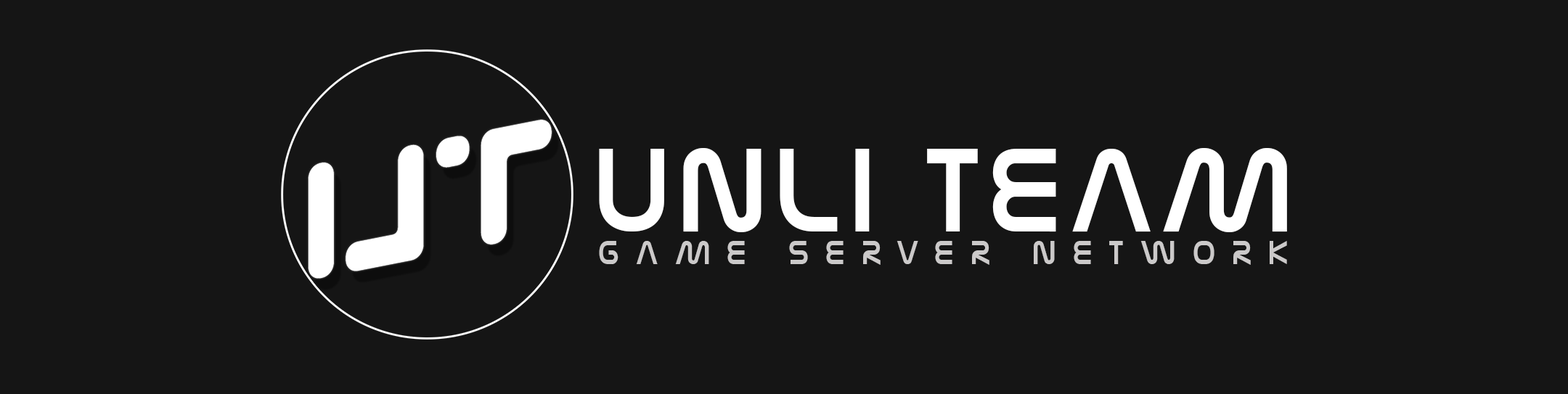
<style>
.page{position:relative;width:1568px;height:394px;background:#151515}
.page>*{position:absolute;margin:0}
.t1{font:131.8px "NasalizationFree";letter-spacing:0.066em;color:#ffffff;scale:0.93 1}
.t2{font:36.9px "NasalizationFree";letter-spacing:0.5em;color:#cbc9c9;scale:0.9 1}
</style>
<div class="page">
<p class="t1" style="left:599px;top:148px;width:688px;height:84px">UNLI TEAM</p>
<p class="t2" style="left:599px;top:241px;width:688px;height:24px">GAME SERVER NETWORK</p>
</div>
